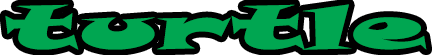
<style>
.page{position:relative;width:432px;height:55px;background:#00a651}
.page>*{position:absolute;margin:0}
.t1{font:60px "SnapITC-Regular";color:#00a651;scale:2 1}
</style>
<div class="page">
<p class="t1" style="left:5px;top:4px;width:422px;height:46px">turtle</p>
</div>
